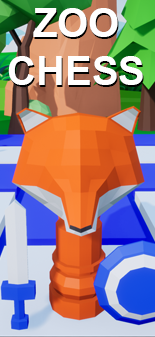
<style>
.page{position:relative;width:155px;height:337px}
.page>*{position:absolute;margin:0}
.t1{font:40px "Arial-BoldMT";color:#ffffff}
.t2{font:40px "Arial-BoldMT"}
</style>
<div class="page">
<p class="t1" style="left:8px;top:8px;width:135px;height:77px;text-align:center">ZOO<br>CHESS</p>
<p class="t2" style="left:9px;top:10px;width:135px;height:77px;text-align:center">ZOO<br>CHESS</p>
</div>
